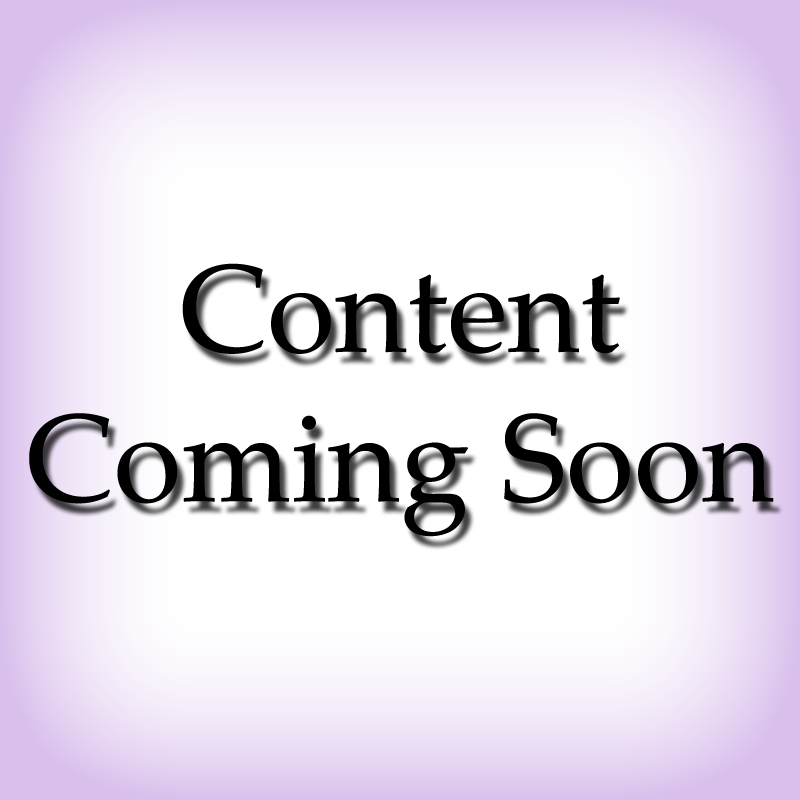
<style>
.page{position:relative;width:800px;height:800px;background:#ffffff}
.page>*{position:absolute;margin:0}
.t1{font:124.6px "PalatinoLinotype-Roman";color:#000000}
</style>
<div class="page">
<p class="t1" style="left:29px;top:263px;width:745px;height:274px;text-align:center">Content Coming Soon</p>
</div>
